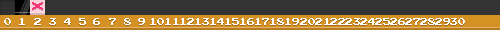
<style>
.page{position:relative;width:500px;height:30px;background:#333333}
.page>*{position:absolute;margin:0}
.t1{font:8px "PressStart2P";color:#ffffff}
</style>
<div class="page">
<p class="t1" style="left:4px;top:18px;width:7px;height:7px">0</p>
<p class="t1" style="left:19px;top:18px;width:6px;height:7px">1</p>
<p class="t1" style="left:34px;top:18px;width:7px;height:7px">2</p>
<p class="t1" style="left:49px;top:18px;width:7px;height:7px">3</p>
<p class="t1" style="left:64px;top:18px;width:7px;height:7px">4</p>
<p class="t1" style="left:79px;top:18px;width:7px;height:7px">5</p>
<p class="t1" style="left:93px;top:18px;width:7px;height:7px">6</p>
<p class="t1" style="left:109px;top:18px;width:7px;height:7px">7</p>
<p class="t1" style="left:124px;top:18px;width:7px;height:7px">8</p>
<p class="t1" style="left:138px;top:18px;width:7px;height:7px">9</p>
<p class="t1" style="left:150px;top:18px;width:14px;height:7px">10</p>
<p class="t1" style="left:165px;top:18px;width:14px;height:7px">11</p>
<p class="t1" style="left:180px;top:18px;width:14px;height:7px">12</p>
<p class="t1" style="left:195px;top:18px;width:14px;height:7px">13</p>
<p class="t1" style="left:210px;top:18px;width:14px;height:7px">14</p>
<p class="t1" style="left:225px;top:18px;width:14px;height:7px">15</p>
<p class="t1" style="left:240px;top:18px;width:14px;height:7px">16</p>
<p class="t1" style="left:255px;top:18px;width:14px;height:7px">17</p>
<p class="t1" style="left:270px;top:18px;width:14px;height:7px">18</p>
<p class="t1" style="left:285px;top:18px;width:14px;height:7px">19</p>
<p class="t1" style="left:300px;top:18px;width:15px;height:7px">20</p>
<p class="t1" style="left:315px;top:18px;width:15px;height:7px">21</p>
<p class="t1" style="left:330px;top:18px;width:15px;height:7px">22</p>
<p class="t1" style="left:345px;top:18px;width:15px;height:7px">23</p>
<p class="t1" style="left:360px;top:18px;width:15px;height:7px">24</p>
<p class="t1" style="left:375px;top:18px;width:15px;height:7px">25</p>
<p class="t1" style="left:390px;top:18px;width:15px;height:7px">26</p>
<p class="t1" style="left:405px;top:18px;width:15px;height:7px">27</p>
<p class="t1" style="left:420px;top:18px;width:15px;height:7px">28</p>
<p class="t1" style="left:435px;top:18px;width:15px;height:7px">29</p>
<p class="t1" style="left:450px;top:18px;width:15px;height:7px">30</p>
</div>
